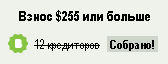
<style>
.page{position:relative;width:168px;height:64px;background:#eef2ea}
.page>*{position:absolute;margin:0}
.t1{font:14px "ArialNarrow-Bold";color:#020300}
.t2{font:12px "ArialNarrow";color:#020300}
.t3{font:12px "ArialNarrow-Bold";color:#020300}
</style>
<div class="page">
<p class="t1" style="left:19px;top:10px;width:131px;height:12px">Взнос $255 или больше</p>
<p class="t2" style="left:34px;top:39px;width:66px;height:12px">12 кредиторов</p>
<p class="t3" style="left:110px;top:40px;width:44px;height:11px">Собрано!</p>
</div>
